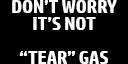
<style>
.page{position:relative;width:128px;height:64px;background:#000000}
.page>*{position:absolute;margin:0}
.t1{font:18.1px/16.9px "HPSimplified-Bold";letter-spacing:-0.01em;color:#ffffff}
</style>
<div class="page">
<p class="t1" style="left:12px;top:0px;width:105px;height:64px;text-align:center">DON’T WORRY<br>IT’S NOT<br><br>“TEAR” GAS</p>
</div>
